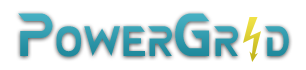
<style>
.page{position:relative;width:306px;height:70px;background:#ffffff}
.page>*{position:absolute;margin:0}
.t1{font:60.7px "NEOTERIQUE";letter-spacing:0.024em;color:#25a1b7;font-variant:small-caps}
</style>
<div class="page">
<p class="t1" style="left:18px;top:13px;width:271px;height:44px">PowerGr d</p>
</div>
